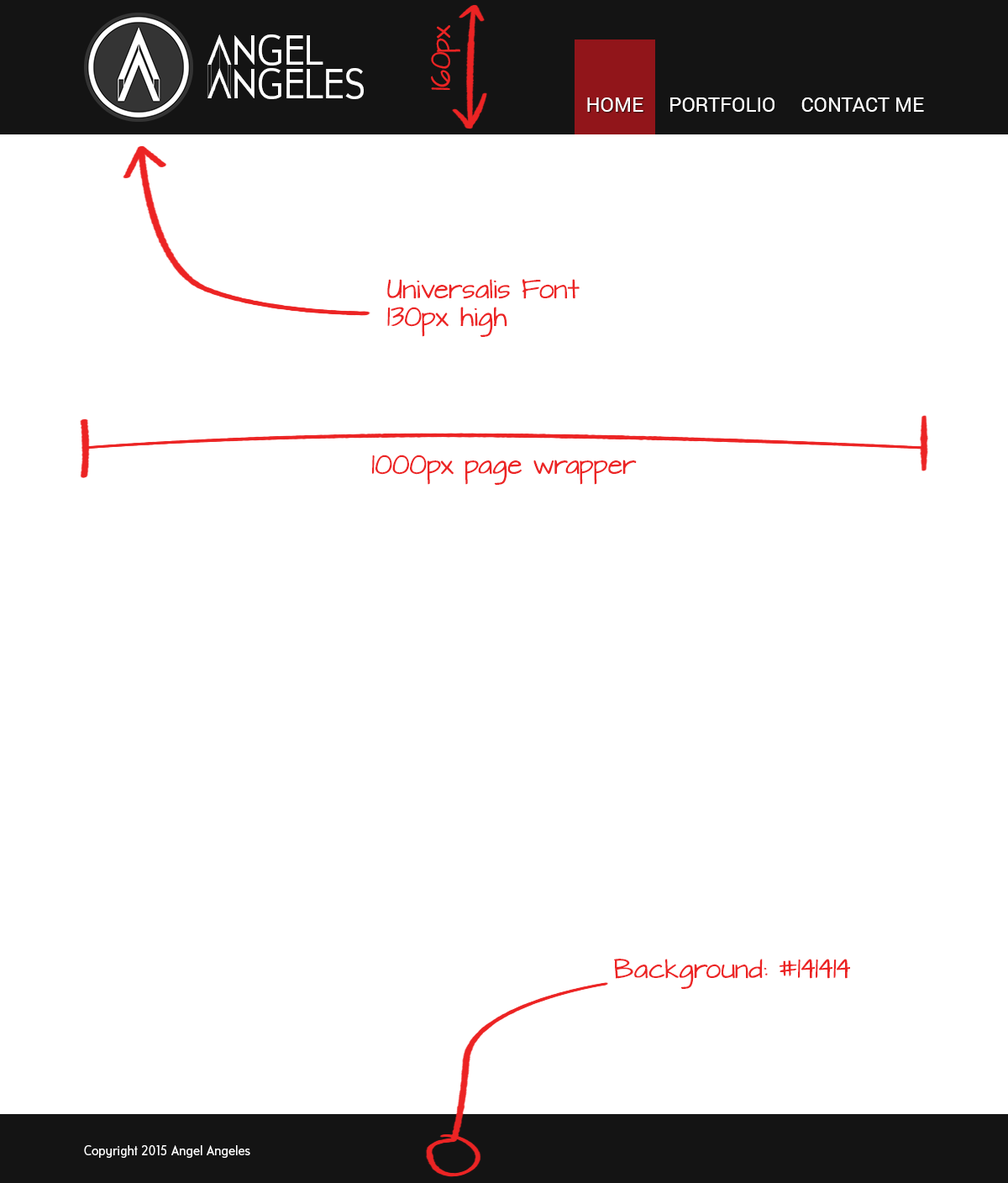
<style>
.page{position:relative;width:1008px;height:1183px;background:#ffffff}
.page>*{position:absolute;margin:0}
.t1{font:22.7px "ArchitectsDaughter";color:#ec2424}
.t2{font:42px "UniversalisADFStd-Regular";color:#ffffff}
.t3{font:20.2px "Roboto-Regular";color:#ffffff}
.t4{font:13.4px "UniversalisADFStd-Regular";color:#ffffff}
</style>
<div class="page">
<p class="t1" style="left:431px;top:25px;width:29px;height:65px;rotate:-90deg">160px</p>
<p class="t2" style="left:208px;top:34px;width:156px;height:32px">ANGELES</p>
<p class="t2" style="left:208px;top:68px;width:156px;height:31px">ANGELES</p>
<p class="t3" style="left:587px;top:97px;width:337px;height:15px">HOME     PORTFOLIO     CONTACT ME</p>
<p class="t1" style="left:387px;top:279px;width:193px;height:58px">Universalis Font<br>130px high</p>
<p class="t1" style="left:372px;top:454px;width:265px;height:31px">1000px page wrapper</p>
<p class="t1" style="left:614px;top:959px;width:236px;height:30px">Background: #141414</p>
<p class="t4" style="left:84px;top:1145px;width:166px;height:13px">Copyright 2015 Angel Angeles</p>
</div>
